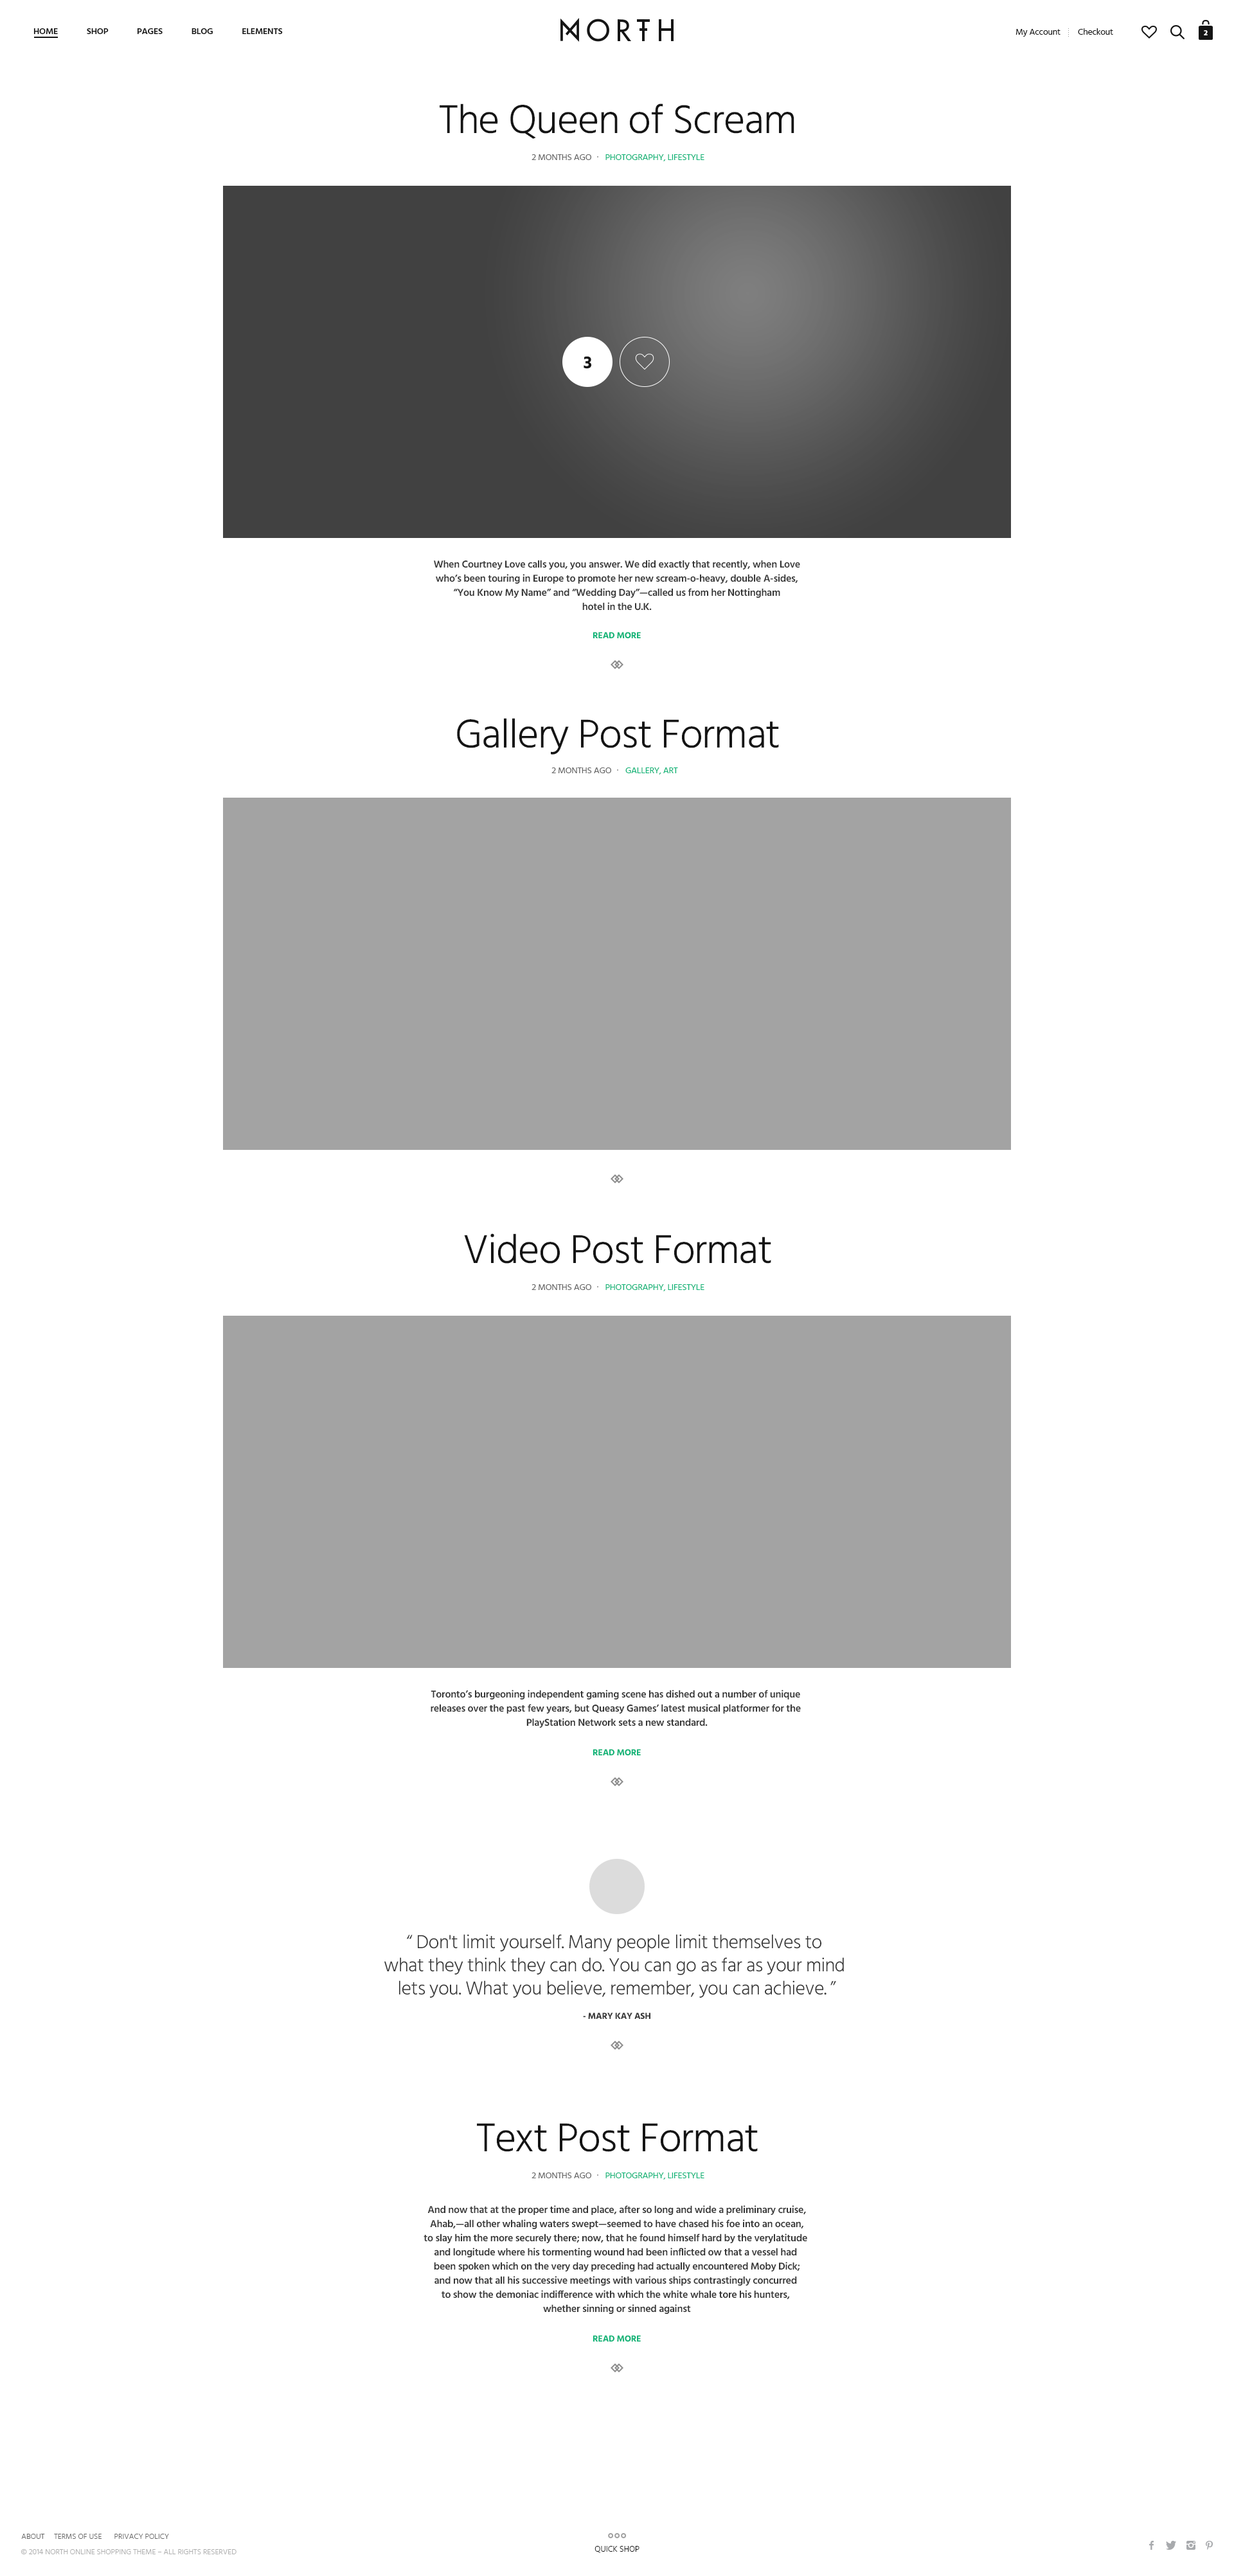
<style>
.page{position:relative;width:1234px;height:2571px;background:#ffffff}
.page>*{position:absolute;margin:0}
.t1{font:9px "Hind-Semibold";letter-spacing:-0.02em;color:#141414;text-transform:uppercase}
.t2{font:9px "Hind-Regular";letter-spacing:-0.02em;color:#141414}
.t3{font:7.1px "ArialMT";color:#919191}
.t4{font:7.7px "Hind-Bold";letter-spacing:-0.02em;color:#ffffff;text-transform:uppercase}
.t5{font:41.1px "Hind-Light";letter-spacing:-0.02em;color:#141414}
.t6{font:9px "Hind-Regular";letter-spacing:-0.02em;color:#676767}
.t7{font:9px "Hind-Regular";letter-spacing:-0.02em;color:#0eb477}
.t8{font:18px "Hind-Bold";letter-spacing:-0.02em;color:#141414}
.t9{font:10.3px/14.1px "Hind-Semibold";letter-spacing:-0.02em;color:#363636}
.t10{font:9px "Hind-Bold";letter-spacing:-0.02em;color:#0eb477}
.t11{font:19.3px/23.1px "Hind-Light";letter-spacing:-0.02em;color:#363636}
.t12{font:9px "Hind-Bold";letter-spacing:-0.02em;color:#363636;text-transform:uppercase}
.t13{font:7.7px "Hind-Light";color:#666666;text-transform:uppercase}
.t14{font:7.7px "Hind-Light";color:#adadad;text-transform:uppercase}
.t15{font:8.4px "Hind-Light";color:#151515;text-transform:uppercase}
</style>
<div class="page">
<p class="t1" style="left:33px;top:28px;width:250px;height:6px">HOME              SHOP              PAGES              BLOG              ELEMENTS</p>
<p class="t2" style="left:1016px;top:29px;width:45px;height:8px">My Account</p>
<p class="t3" style="left:1068px;top:28px;width:1px;height:9px;rotate:-90deg">.....</p>
<p class="t2" style="left:1078px;top:28px;width:35px;height:7px">Checkout</p>
<p class="t4" style="left:1204px;top:30px;width:4px;height:5px">2</p>
<p class="t5" style="left:440px;top:104px;width:355px;height:35px">The Queen of Scream</p>
<p class="t6" style="left:532px;top:154px;width:59px;height:6px">2 MONTHS AGO</p>
<p class="t7" style="left:606px;top:154px;width:99px;height:7px">PHOTOGRAPHY, LIFESTYLE</p>
<p class="t8" style="left:584px;top:356px;width:7px;height:13px">3</p>
<p class="t9" style="left:434px;top:560px;width:366px;height:51px;text-align:center">When Courtney Love calls you, you answer. We did exactly that recently, when Love<br>who’s been touring in Europe to promote her new scream-o-heavy, double A-sides,<br>“You Know My Name” and “Wedding Day”—called us from her Nottingham<br>hotel in the U.K.</p>
<p class="t10" style="left:593px;top:632px;width:48px;height:6px">READ MORE</p>
<p class="t5" style="left:457px;top:718px;width:322px;height:37px">Gallery Post Format</p>
<p class="t6" style="left:552px;top:768px;width:59px;height:5px">2 MONTHS AGO</p>
<p class="t7" style="left:626px;top:768px;width:52px;height:7px">GALLERY, ART</p>
<p class="t5" style="left:464px;top:1234px;width:307px;height:30px">Video Post Format</p>
<p class="t6" style="left:532px;top:1284px;width:59px;height:6px">2 MONTHS AGO</p>
<p class="t7" style="left:606px;top:1284px;width:99px;height:8px">PHOTOGRAPHY, LIFESTYLE</p>
<p class="t9" style="left:431px;top:1690px;width:370px;height:38px;text-align:center">Toronto’s burgeoning independent gaming scene has dished out a number of unique <br>releases over the past few years, but Queasy Games’ latest musical platformer for the <br>PlayStation Network sets a new standard.</p>
<p class="t10" style="left:593px;top:1749px;width:48px;height:7px">READ MORE</p>
<p class="t11" style="left:384px;top:1934px;width:460px;height:64px;text-align:center">“ Don't limit yourself. Many people limit themselves to <br>what they think they can do. You can go as far as your mind <br>lets you. What you believe, remember, you can achieve. ”</p>
<p class="t12" style="left:583px;top:2013px;width:68px;height:6px">- Mary Kay Ash</p>
<p class="t5" style="left:477px;top:2123px;width:281px;height:29px">Text Post Format</p>
<p class="t6" style="left:532px;top:2173px;width:59px;height:6px">2 MONTHS AGO</p>
<p class="t7" style="left:606px;top:2173px;width:99px;height:7px">PHOTOGRAPHY, LIFESTYLE</p>
<p class="t9" style="left:424px;top:2206px;width:383px;height:108px;text-align:center">And now that at the proper time and place, after so long and wide a preliminary cruise,<br>Ahab,—all other whaling waters swept—seemed to have chased his foe into an ocean,<br>to slay him the more securely there; now, that he found himself hard by the verylatitude <br>and longitude where his tormenting wound had been inflicted ow that a vessel had <br>been spoken which on the very day preceding had actually encountered Moby Dick;<br>and now that all his successive meetings with various ships contrastingly concurred <br>to show the demoniac indifference with which the white whale tore his hunters, <br>whether sinning or sinned against</p>
<p class="t10" style="left:593px;top:2336px;width:48px;height:6px">READ MORE</p>
<p class="t13" style="left:21px;top:2534px;width:24px;height:5px">ABOUT</p>
<p class="t13" style="left:54px;top:2534px;width:48px;height:5px">TERMS OF USE</p>
<p class="t13" style="left:114px;top:2534px;width:55px;height:5px">PRIVACY POLICY</p>
<p class="t14" style="left:21px;top:2550px;width:216px;height:5px">© 2014 NORTH ONLINE SHOPPING THEME – All Rights Reserved</p>
<p class="t15" style="left:595px;top:2546px;width:45px;height:7px">QUICK SHOP</p>
</div>
